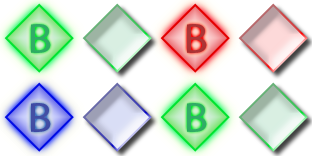
<style>
.page{position:relative;width:312px;height:156px;background:#ffffff}
.page>*{position:absolute;margin:0}
.t1{font:42px "MyriadPro-Regular";color:#31ac66;scale:1.1 1}
.t2{font:42px "MyriadPro-Regular";color:#ac3636;scale:1.1 1}
.t3{font:42px "MyriadPro-Regular";color:#434ea4;scale:1.1 1}
</style>
<div class="page">
<p class="t1" style="left:31px;top:24px;width:20px;height:29px">B</p>
<p class="t2" style="left:187px;top:24px;width:20px;height:29px">B</p>
<p class="t3" style="left:31px;top:103px;width:20px;height:29px">B</p>
<p class="t1" style="left:187px;top:103px;width:20px;height:29px">B</p>
</div>
